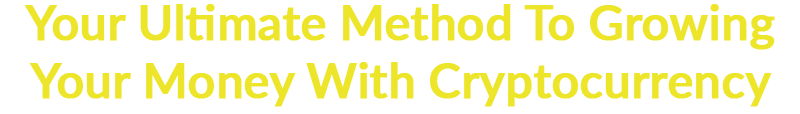
<style>
.page{position:relative;width:800px;height:114px;background:#ffffff}
.page>*{position:absolute;margin:0}
.t1{font:48px "Lato-Semibold";letter-spacing:-0.01em;color:#ece52a;font-weight:bold}
</style>
<div class="page">
<p class="t1" style="left:24px;top:4px;width:751px;height:103px;text-align:center">Your Ultimate Method To Growing<br>Your Money With Cryptocurrency</p>
</div>
